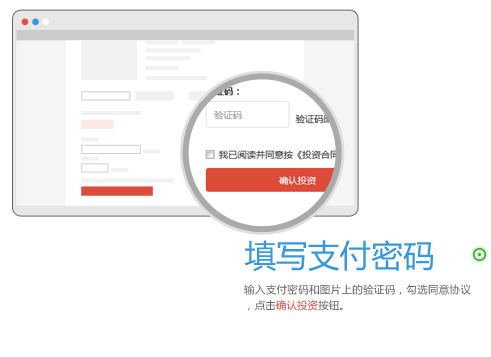
<style>
.page{position:relative;width:491px;height:357px;background:#ffffff}
.page>*{position:absolute;margin:0}
.t1{font:31.8px "MicrosoftYaHei";color:#3798db}
.t2{font:10.6px/15.9px "MicrosoftYaHei";color:#666666}
.t3{font:10.6px/15.9px "MicrosoftYaHei";color:#dd4b39}
</style>
<div class="page">
<p class="t1" style="left:244px;top:240px;width:189px;height:32px">填写支付密码</p>
<p class="t2" style="left:244px;top:284px;width:227px;height:27px;text-align:justify">输入支付密码和图片上的验证码，勾选同意协议，点击<span class="t3">确认投资</span>按钮。</p>
</div>
